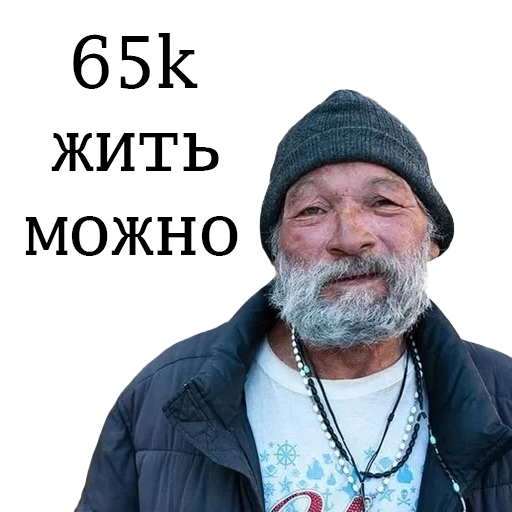
<style>
.page{position:relative;width:512px;height:512px;background:#ffffff}
.page>*{position:absolute;margin:0}
.t1{font:72px "GoMonoForPowerline";color:#000000}
</style>
<div class="page">
<p class="t1" style="left:73px;top:33px;width:125px;height:56px">65k</p>
<p class="t1" style="left:51px;top:133px;width:168px;height:38px">жить</p>
<p class="t1" style="left:25px;top:216px;width:213px;height:40px">можно</p>
</div>
